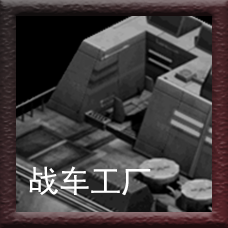
<style>
.page{position:relative;width:228px;height:228px}
.page>*{position:absolute;margin:0}
.t1{font:31px "SimHei";color:#ffffff}
</style>
<div class="page">
<p class="t1" style="left:29px;top:166px;width:122px;height:30px">战车工厂</p>
</div>
